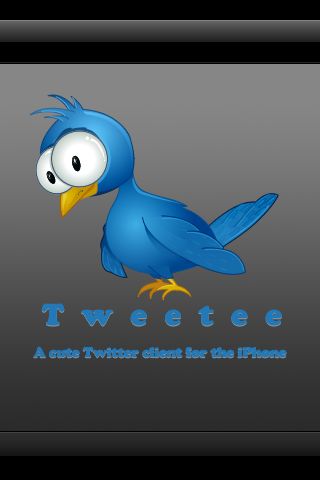
<style>
.page{position:relative;width:320px;height:480px}
.page>*{position:absolute;margin:0}
.t1{font:30px "CooperBlackStd";letter-spacing:0.585em;color:#2378b7}
.t2{font:14px "CooperBlackStd";letter-spacing:-0.04em;color:#2378b7}
</style>
<div class="page">
<p class="t1" style="left:41px;top:303px;width:241px;height:23px">Tweetee</p>
<p class="t2" style="left:33px;top:346px;width:254px;height:12px">A cute Twitter client for the iPhone</p>
</div>
